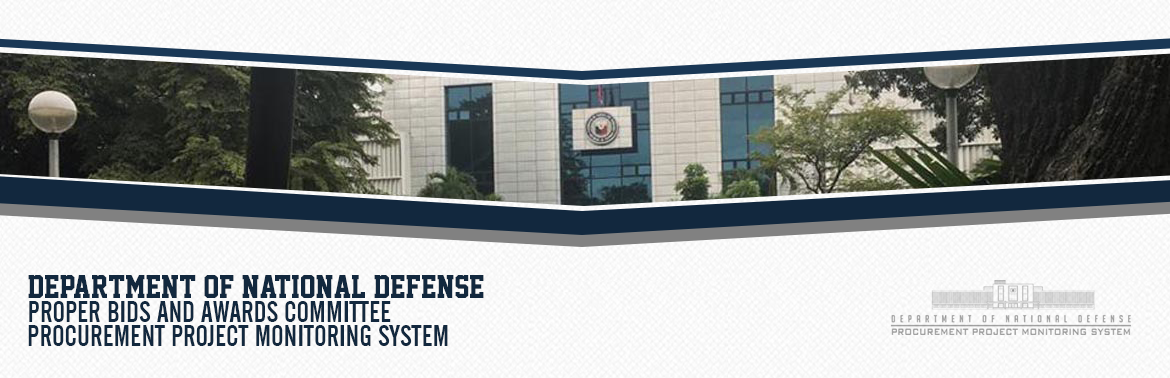
<style>
.page{position:relative;width:1170px;height:378px}
.page>*{position:absolute;margin:0}
.t1{font:30px "AcademicM54";color:#12283e}
.t2{font:30px "AlternateGothicNo2BT-Regular";color:#12283e}
</style>
<div class="page">
<p class="t1" style="left:28px;top:275px;width:456px;height:23px">DEPARTMENT OF NATIONAL DEFENSE</p>
<p class="t2" style="left:29px;top:301px;width:362px;height:21px">PROPER BIDS AND AWARDS COMMITTEE</p>
<p class="t2" style="left:28px;top:325px;width:420px;height:21px">PROCUREMENT PROJECT MONITORING SYSTEM</p>
</div>
